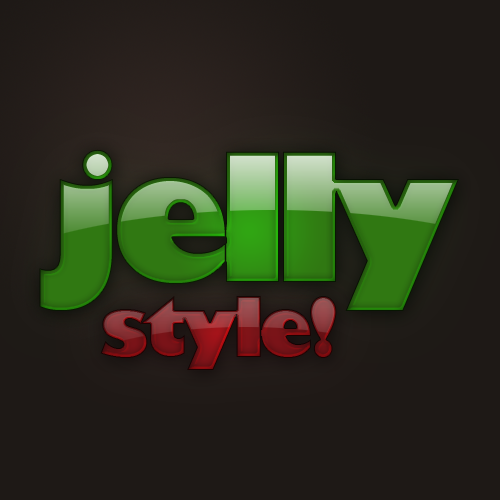
<style>
.page{position:relative;width:500px;height:500px;background:#1e1916}
.page>*{position:absolute;margin:0}
.t1{font:174.5px "GillSans-UltraBold";letter-spacing:-0.09em}
.t2{font:80px "GillSans-UltraBold";letter-spacing:-0.09em}
</style>
<div class="page">
<p class="t1" style="left:39px;top:149px;width:420px;height:162px">jelly</p>
<p class="t2" style="left:100px;top:296px;width:237px;height:74px">style!</p>
</div>
